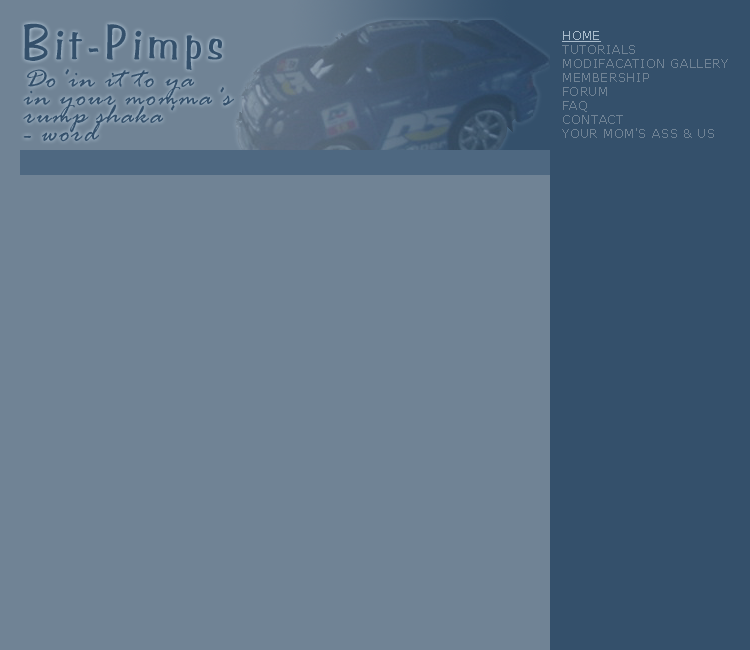
<style>
.page{position:relative;width:750px;height:650px;background:#708395}
.page>*{position:absolute;margin:0}
.t1{font:48px "BenguiatFrisky";letter-spacing:0.1em;color:#34506b}
.t2{font:12px/14px "Verdana";letter-spacing:0.05em;color:#708395}
.t3{font:12px/14px "Verdana";letter-spacing:0.05em;color:#aabccc;text-decoration:underline}
.t4{font:30px/18px "RageItalic";letter-spacing:0.05em;color:#34506b}
</style>
<div class="page">
<p class="t1" style="left:24px;top:23px;width:198px;height:47px">Bit-Pimps</p>
<p class="t2" style="left:562px;top:31px;width:166px;height:107px"><span class="t3">HOME<br></span>TUTORIALS<br>MODIFACATION GALLERY<br>MEMBERSHIP<br>FORUM<br>FAQ<br>CONTACT<br>YOUR MOM'S ASS &amp; US</p>
<p class="t4" style="left:23px;top:69px;width:211px;height:73px">Do'in it to ya<br>in your momma's<br>rump shaka'<br>- word</p>
</div>
